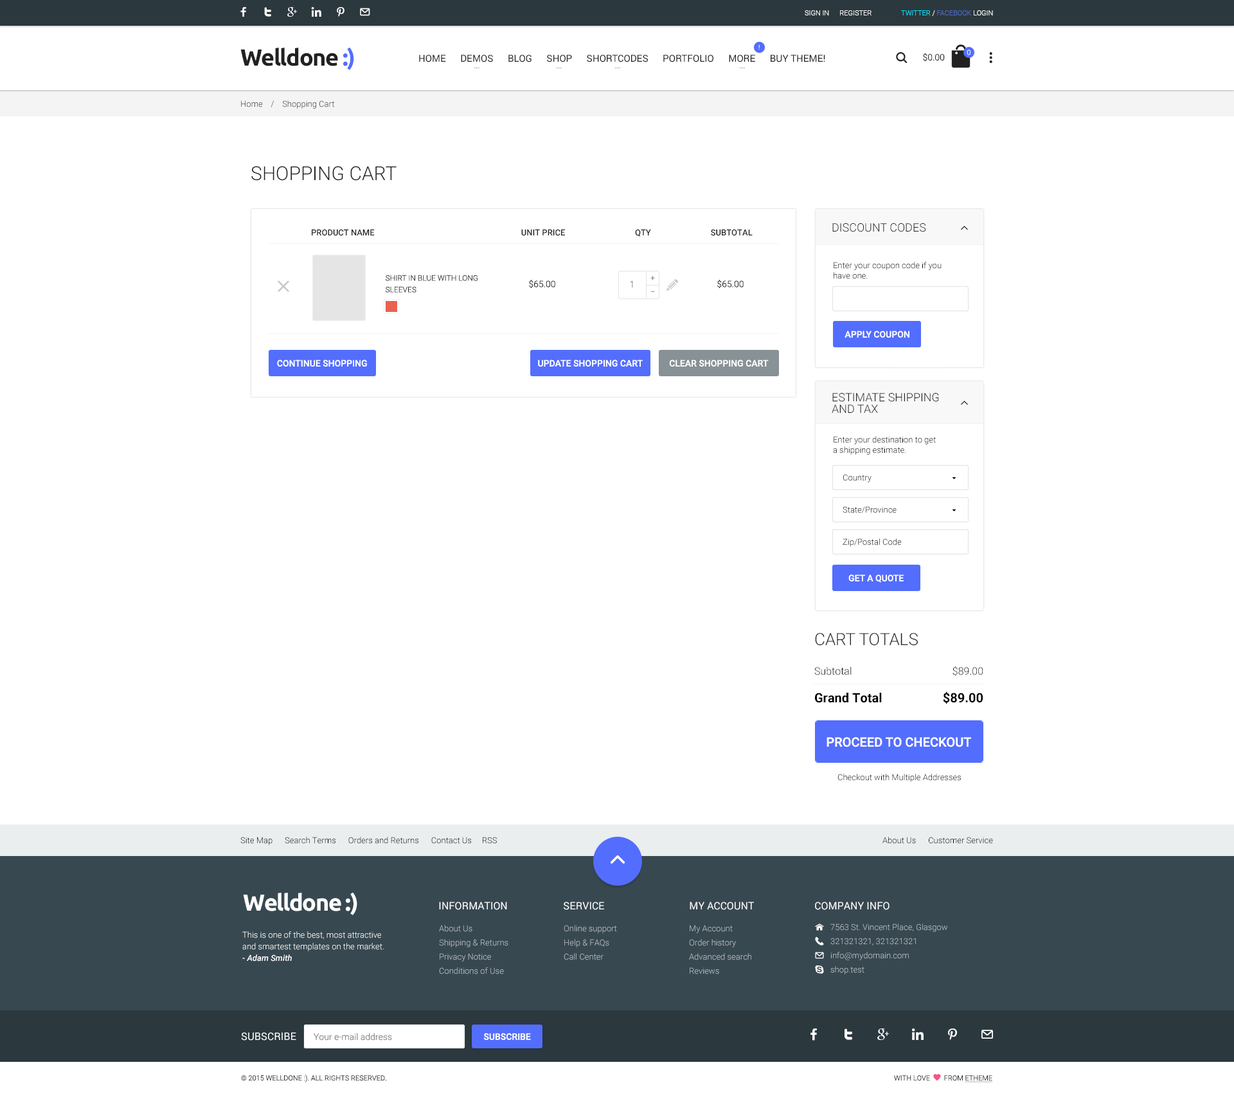
<style>
.page{position:relative;width:1234px;height:1094px;background:#ffffff}
.page>*{position:absolute;margin:0}
.t1{font:7.1px "Roboto-Light";color:#ffffff}
.t2{font:7.1px "Roboto-Light";color:#526ac4}
.t3{font:7.1px "Roboto-Light";color:#00e4ff}
.t4{font:23.1px "Ubuntu-Bold";letter-spacing:-0.04em;color:#212121}
.t5{font:23.1px "Ubuntu-Bold";letter-spacing:-0.04em;color:#536dfe}
.t6{font:6.4px "Roboto-Regular"}
.t7{font:9px "Roboto-Light";color:#212121}
.t8{font:9.6px "Roboto-Regular";color:#212121}
.t9{font:8.4px "Roboto-Light";color:#2b2b2b}
.t10{font:19.3px "Roboto-Light";color:#212121;text-transform:uppercase}
.t11{font:8.4px "Roboto-Medium";color:#212121;text-transform:uppercase}
.t12{font:11.6px "Roboto-Light";color:#212121}
.t13{font:8.4px/10.3px "Roboto-Light";color:#000000}
.t14{font:7.7px/11.6px "Roboto-Light";color:#2b2b2b;text-transform:uppercase}
.t15{font:9px "Roboto-Light"}
.t16{font:7.7px "MyriadPro-Regular";color:#7a7a7a}
.t17{font:7.7px "MyriadPro-Regular"}
.t18{font:9px "Roboto-Medium";color:#ffffff;text-transform:uppercase}
.t19{font:11.6px/11.6px "Roboto-Light";color:#212121}
.t20{font:8.4px "Roboto-Light"}
.t21{font:8.4px "Roboto-Light";color:#000000}
.t22{font:16.7px "Roboto-Light";color:#212121}
.t23{font:10.3px "Roboto-Light";color:#000000}
.t24{font:12.9px "Roboto-Bold";color:#000000}
.t25{font:12.9px "Roboto-Medium";color:#ffffff;text-transform:uppercase}
.t26{font:23.1px "Ubuntu-Bold";letter-spacing:-0.04em;color:#ffffff}
.t27{font:10.3px "Roboto-Regular";color:#ffffff;text-transform:uppercase}
.t28{font:8.4px/14.1px "Roboto-Light";color:#bbc2c6}
.t29{font:8.4px/11.6px "Roboto-Light";color:#ffffff}
.t30{font:8.4px/11.6px "Roboto-MediumItalic";color:#ffffff}
.t31{font:9px "Roboto-Light";color:#848484}
.t32{font:7.1px "Roboto-Light";color:#2b2b2b;text-transform:uppercase}
</style>
<div class="page">
<p class="t1" style="left:805px;top:10px;width:67px;height:5px">SIGN IN      REGISTER</p>
<p class="t2" style="left:901px;top:10px;width:92px;height:6px"><span class="t3">TWITTER </span><span class="t1">/ </span>FACEBOOK <span class="t1">LOGIN</span></p>
<p class="t4" style="left:240px;top:47px;width:114px;height:23px">Welldone <span class="t5">:)</span></p>
<p class="t6" style="left:759px;top:44px;width:1px;height:6px">!</p>
<p class="t7" style="left:923px;top:53px;width:22px;height:9px">$0.00</p>
<p class="t1" style="left:967px;top:50px;width:4px;height:5px">0</p>
<p class="t8" style="left:419px;top:55px;width:406px;height:7px">HOME      DEMOS      BLOG      SHOP      SHORTCODES      PORTFOLIO      MORE      BUY THEME!</p>
<p class="t9" style="left:241px;top:100px;width:93px;height:9px">Home    /    Shopping Cart</p>
<p class="t10" style="left:251px;top:166px;width:146px;height:15px">Shopping cart</p>
<p class="t11" style="left:312px;top:229px;width:441px;height:8px">Product Name                  Unit Price    Qty      Subtotal</p>
<p class="t12" style="left:833px;top:223px;width:93px;height:9px">DISCOUNT CODES</p>
<p class="t13" style="left:834px;top:262px;width:108px;height:17px">Enter your coupon code if you <br>have one.</p>
<p class="t14" style="left:386px;top:275px;width:92px;height:18px">Shirt In Blue With Long <br>Sleeves</p>
<p class="t7" style="left:529px;top:280px;width:26px;height:8px">$65.00</p>
<p class="t15" style="left:630px;top:281px;width:3px;height:6px">1</p>
<p class="t16" style="left:651px;top:276px;width:4px;height:4px">+</p>
<p class="t7" style="left:717px;top:280px;width:27px;height:8px">$65.00</p>
<p class="t17" style="left:651px;top:291px;width:4px;height:1px">–</p>
<p class="t18" style="left:845px;top:330px;width:65px;height:8px">Apply Coupon</p>
<p class="t18" style="left:277px;top:359px;width:90px;height:7px">Continue Shopping</p>
<p class="t18" style="left:538px;top:359px;width:105px;height:7px">Update Shopping Cart</p>
<p class="t18" style="left:669px;top:359px;width:100px;height:7px">Clear Shopping Cart</p>
<p class="t19" style="left:832px;top:393px;width:107px;height:20px">ESTIMATE SHIPPING <br>AND TAX</p>
<p class="t13" style="left:833px;top:436px;width:103px;height:19px">Enter your destination to get <br>a shipping estimate.</p>
<p class="t20" style="left:843px;top:474px;width:29px;height:8px">Country</p>
<p class="t21" style="left:843px;top:506px;width:54px;height:7px">State/Province</p>
<p class="t21" style="left:843px;top:538px;width:59px;height:8px">Zip/Postal Code</p>
<p class="t18" style="left:849px;top:574px;width:55px;height:8px">Get a Quote</p>
<p class="t22" style="left:815px;top:633px;width:103px;height:12px">CART TOTALS</p>
<p class="t23" style="left:815px;top:666px;width:168px;height:10px">Subtotal    $89.00</p>
<p class="t24" style="left:815px;top:691px;width:168px;height:13px">Grand Total $89.00</p>
<p class="t25" style="left:827px;top:737px;width:144px;height:10px">Proceed to checkout</p>
<p class="t21" style="left:838px;top:773px;width:123px;height:9px">Checkout with Multiple Addresses</p>
<p class="t21" style="left:240px;top:836px;width:257px;height:9px">Site Map      Search Terms      Orders and Returns      Contact Us     RSS</p>
<p class="t21" style="left:883px;top:836px;width:110px;height:7px">About Us      Customer Service</p>
<p class="t26" style="left:243px;top:892px;width:114px;height:23px">Welldone :)</p>
<p class="t27" style="left:439px;top:901px;width:68px;height:9px">Information</p>
<p class="t27" style="left:564px;top:901px;width:40px;height:9px">service</p>
<p class="t27" style="left:690px;top:901px;width:64px;height:9px">My account</p>
<p class="t27" style="left:815px;top:901px;width:75px;height:9px">Company Info</p>
<p class="t28" style="left:439px;top:924px;width:70px;height:50px">About Us<br>Shipping &amp; Returns<br>Privacy Notice<br>Conditions of Use</p>
<p class="t28" style="left:564px;top:924px;width:53px;height:36px">Online support<br>Help &amp; FAQs<br>Call Center</p>
<p class="t28" style="left:689px;top:924px;width:63px;height:50px">My Account<br>Order history<br>Advanced search<br>Reviews</p>
<p class="t28" style="left:831px;top:923px;width:117px;height:51px">7563 St. Vincent Place, Glasgow<br>321321321, 321321321<br>info@mydomain.com<br>shop.test</p>
<p class="t29" style="left:242px;top:931px;width:142px;height:30px">This is one of the best, most attractive and smartest templates on the market. <br><span class="t30">- Adam Smith</span></p>
<p class="t27" style="left:241px;top:1032px;width:55px;height:8px">Subscribe</p>
<p class="t31" style="left:314px;top:1032px;width:78px;height:8px">Your e-mail address</p>
<p class="t18" style="left:483px;top:1032px;width:48px;height:8px">SUBSCRIBE</p>
<p class="t32" style="left:241px;top:1074px;width:145px;height:8px">© 2015 Welldone :). All Rights Reserved.</p>
</div>
